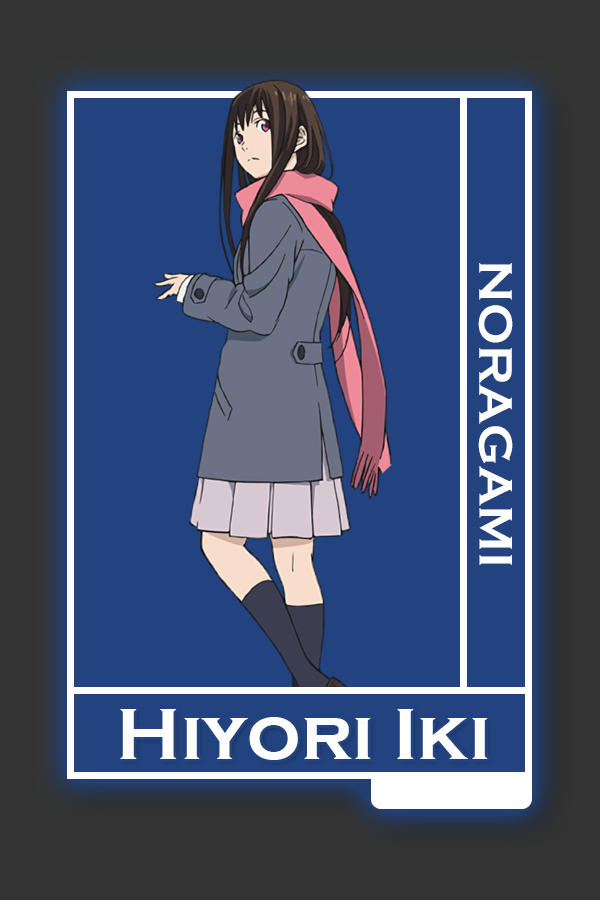
<style>
.page{position:relative;width:600px;height:900px;background:#22437f}
.page>*{position:absolute;margin:0}
.t1{font:48.8px "CopperplateGothic-Bold";color:#ffffff}
.t2{font:75px "CopperplateGothic-Bold";color:#ffffff}
</style>
<div class="page">
<p class="t1" style="left:478px;top:263px;width:35px;height:302px;rotate:90deg">NORAGAMI</p>
<p class="t2" style="left:120px;top:709px;width:368px;height:51px">Hiyori Iki</p>
</div>
